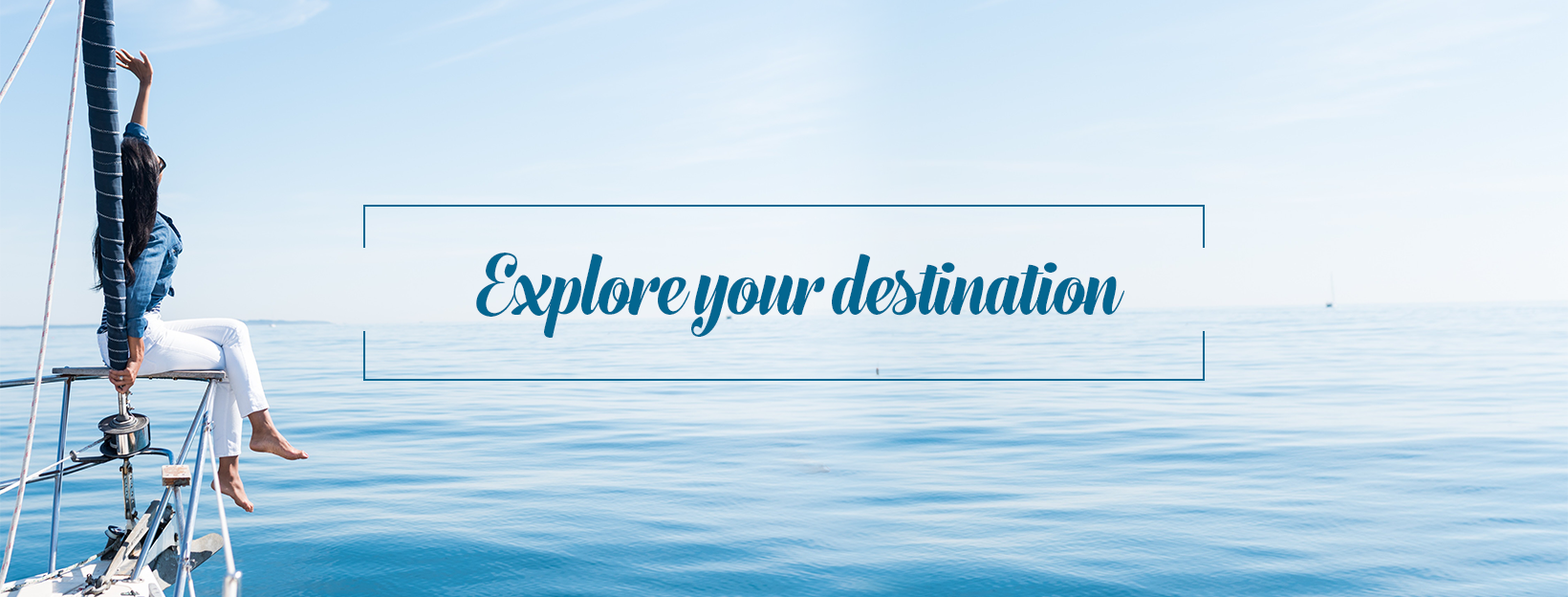
<style>
.page{position:relative;width:1568px;height:597px}
.page>*{position:absolute;margin:0}
.t1{font:95.6px "JourneyBold";color:#036690}
</style>
<div class="page">
<p class="t1" style="left:476px;top:252px;width:648px;height:86px">Explore your destination</p>
</div>
